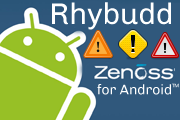
<style>
.page{position:relative;width:180px;height:120px;background:#30587c}
.page>*{position:absolute;margin:0}
.t1{font:30px "Chivo-Regular";color:#ffffff}
.t2{font:14px "Chivo-Regular";color:#ffffff}
.t3{font:5px "Chivo-Regular"}
</style>
<div class="page">
<p class="t1" style="left:52px;top:2px;width:119px;height:28px">Rhybudd</p>
<p class="t2" style="left:97px;top:84px;width:74px;height:11px">for Android</p>
<p class="t3" style="left:172px;top:83px;width:7px;height:5px">TM</p>
</div>
